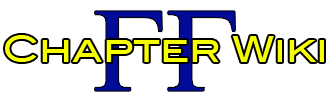
<style>
.page{position:relative;width:330px;height:100px;background:#ffffff}
.page>*{position:absolute;margin:0}
.t1{font:35.8px "BlairMdITCTTMedium";color:#f6ff01}
</style>
<div class="page">
<p class="t1" style="left:5px;top:35px;width:319px;height:27px">Chapter Wiki</p>
</div>
